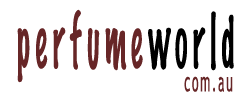
<style>
.page{position:relative;width:250px;height:100px;background:#ffffff}
.page>*{position:absolute;margin:0}
.t1{font:68.4px "MarkerFelt-Thin";letter-spacing:0.14em;color:#672627;scale:0.44 1}
.t2{font:68.4px "MarkerFelt-Thin";letter-spacing:0.14em;color:#000000;scale:0.44 1}
.t3{font:27.4px "TrebuchetMS";letter-spacing:0.14em;color:#672627;scale:0.44 1}
</style>
<div class="page">
<p class="t1" style="left:17px;top:9px;width:217px;height:74px">perfume<span class="t2">world</span></p>
<p class="t3" style="left:184px;top:76px;width:49px;height:16px">com.au</p>
</div>
